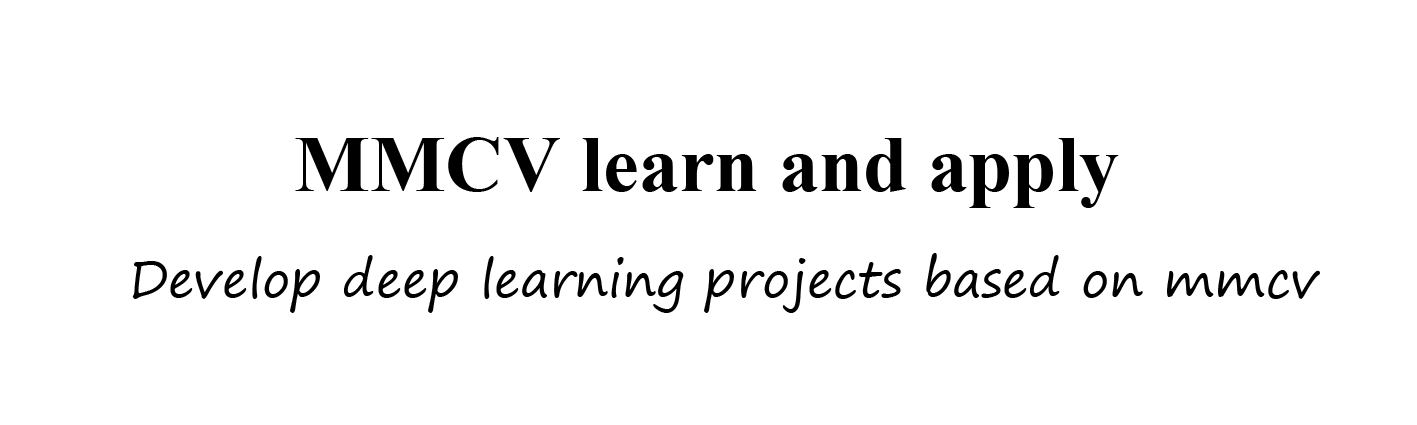
<style>
.page{position:relative;width:1417px;height:425px;background:#ffffff}
.page>*{position:absolute;margin:0}
.t1{font:80px "TimesNewRomanPS-BoldMT";color:#000000}
.t2{font:50px "SegoePrint";color:#000000}
</style>
<div class="page">
<p class="t1" style="left:295px;top:137px;width:824px;height:71px">MMCV learn and apply</p>
<p class="t2" style="left:132px;top:253px;width:1188px;height:60px">Develop deep learning projects based on mmcv</p>
</div>
